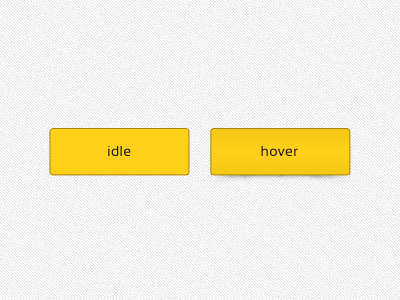
<style>
.page{position:relative;width:400px;height:300px;background:#ffffff}
.page>*{position:absolute;margin:0}
.t1{font:14.2px "Sansation-Regular";letter-spacing:0.025em;color:#202020}
</style>
<div class="page">
<p class="t1" style="left:108px;top:146px;width:23px;height:10px">idle</p>
<p class="t1" style="left:261px;top:146px;width:37px;height:10px">hover</p>
</div>
